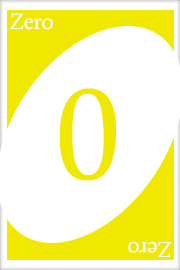
<style>
.page{position:relative;width:180px;height:270px;background:#ffffff}
.page>*{position:absolute;margin:0}
.t1{font:22px "CalistoMT";color:#ffffff}
.t2{font:128px "CalistoMT";color:#f1e800}
.t3{font:21.7px "CalistoMT";color:#ffffff}
</style>
<div class="page">
<p class="t1" style="left:10px;top:13px;width:43px;height:17px">Zero</p>
<p class="t2" style="left:59px;top:88px;width:57px;height:93px">0</p>
<p class="t3" style="left:128px;top:241px;width:43px;height:16px;rotate:180deg">Zero</p>
</div>
